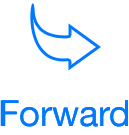
<style>
.page{position:relative;width:129px;height:135px;background:#ffffff}
.page>*{position:absolute;margin:0}
.t1{font:36px "HelveticaNeueLTCom-Roman";letter-spacing:-0.005em;color:#0079ff}
</style>
<div class="page">
<p class="t1" style="left:1px;top:100px;width:127px;height:27px">Forward</p>
</div>
